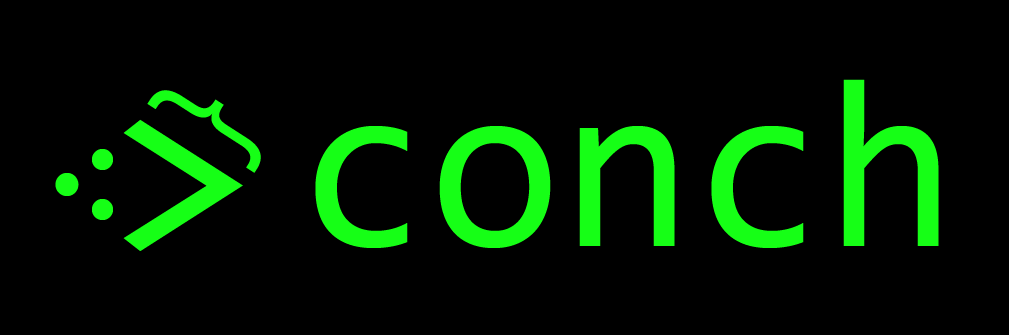
<style>
.page{position:relative;width:1009px;height:335px;background:#000000}
.page>*{position:absolute;margin:0}
.t1{font:240px "Consolas";color:#16ff16}
.t2{font:140px "Consolas";color:#16ff16;scale:0.8 1}
.t3{font:240px "Consolas";color:#16ff16;scale:1.3 1}
.t4{font:140px "Consolas";color:#16ff16}
</style>
<div class="page">
<p class="t1" style="left:315px;top:79px;width:624px;height:169px">conch</p>
<p class="t2" style="left:147px;top:90px;width:114px;height:83px;rotate:-57deg">}</p>
<p class="t3" style="left:123px;top:119px;width:120px;height:132px">&gt;</p>
<p class="t4" style="left:92px;top:149px;width:21px;height:71px">:</p>
<p class="t4" style="left:55px;top:173px;width:24px;height:23px">.</p>
</div>
